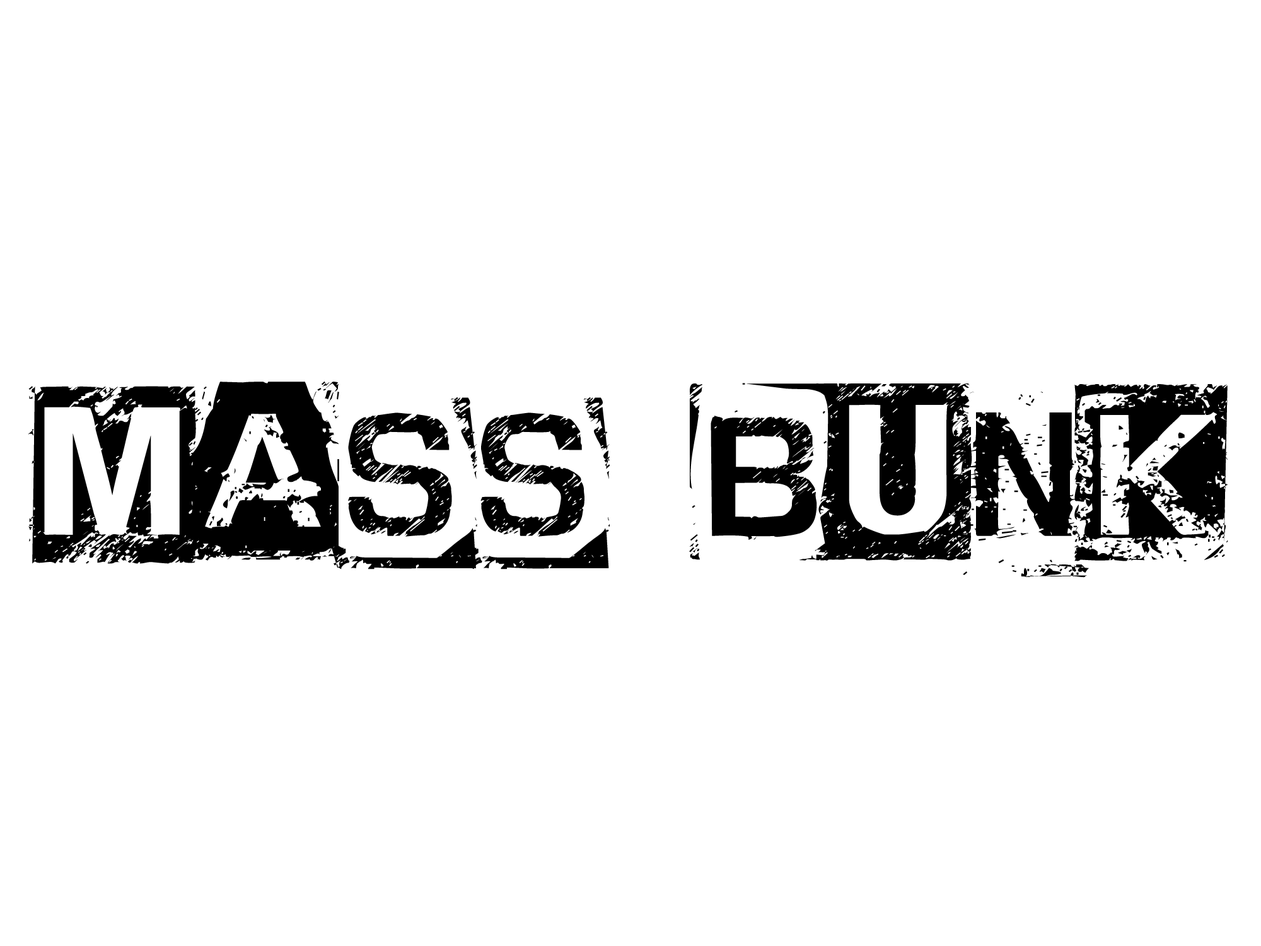
<style>
.page{position:relative;width:1261px;height:946px;background:#ffffff}
.page>*{position:absolute;margin:0}
.t1{font:177.5px "CFAnarchy-Regular";color:#000000;scale:1.2 1}
</style>
<div class="page">
<p class="t1" style="left:28px;top:381px;width:1200px;height:196px">Mass Bunk</p>
</div>
